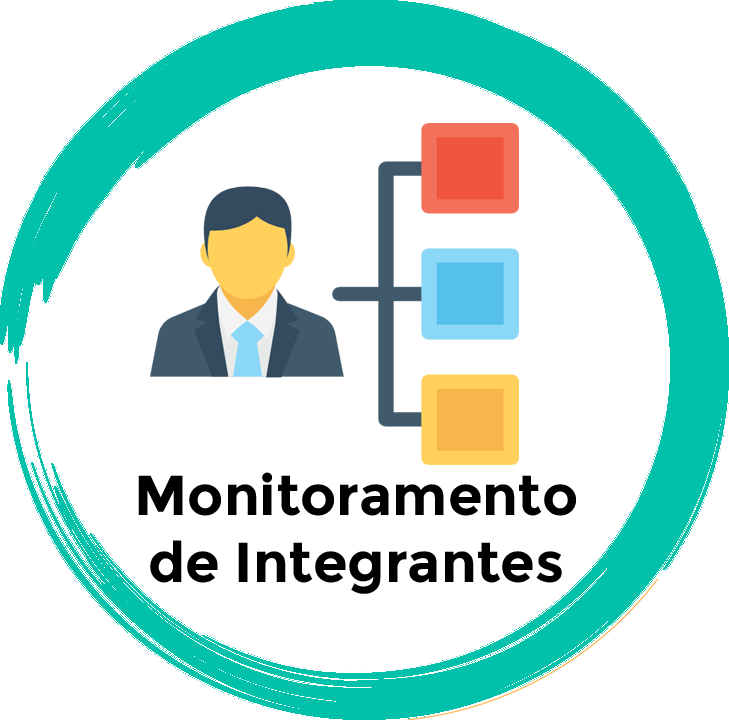
<style>
.page{position:relative;width:729px;height:720px;background:#ffffff}
.page>*{position:absolute;margin:0}
.t1{font:56px "Montserrat-Bold";color:#000000}
</style>
<div class="page">
<p class="t1" style="left:138px;top:472px;width:438px;height:122px;text-align:center">Monitoramento<br>de Integrantes</p>
</div>
